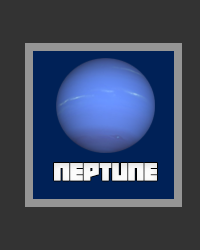
<style>
.page{position:relative;width:200px;height:250px;background:#333333}
.page>*{position:absolute;margin:0}
.t1{font:25.4px "RobotRadicals";color:#ffffff}
</style>
<div class="page">
<p class="t1" style="left:54px;top:163px;width:103px;height:18px">neptune</p>
</div>
